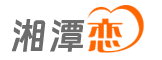
<style>
.page{position:relative;width:162px;height:60px;background:#ffffff}
.page>*{position:absolute;margin:0}
.t1{font:37.5px "DingTalk-JinBuTi";color:#6c6c6c;font-weight:bold}
</style>
<div class="page">
<p class="t1" style="left:11px;top:19px;width:74px;height:33px">湘潭</p>
</div>
